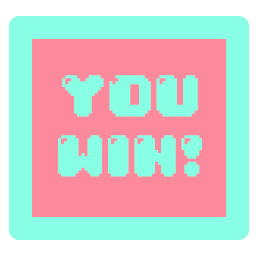
<style>
.page{position:relative;width:256px;height:256px;background:#88ffe4}
.page>*{position:absolute;margin:0}
.t1{font:50px "04b30";color:#88ffe4}
</style>
<div class="page">
<p class="t1" style="left:58px;top:75px;width:144px;height:102px;text-align:center">YOU<br>WIN!</p>
</div>
